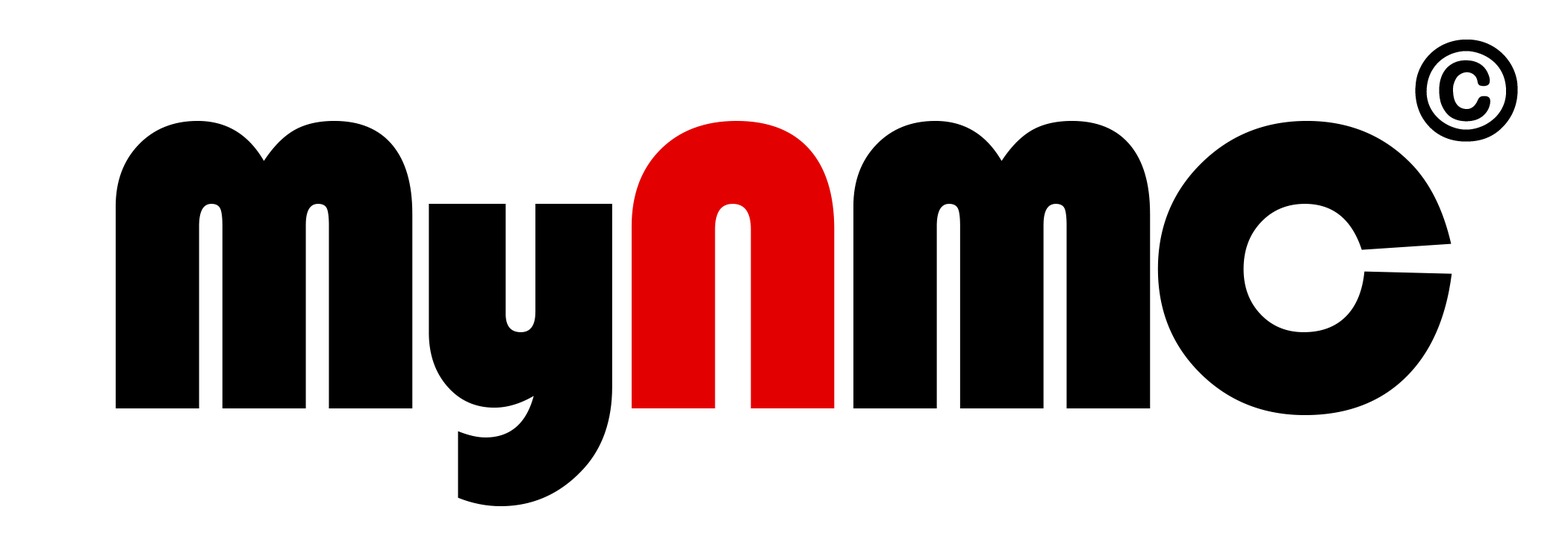
<style>
.page{position:relative;width:1568px;height:542px;background:#ffffff}
.page>*{position:absolute;margin:0}
.t1{font:420px "Bauhaus93";letter-spacing:-0.06em;color:#000000}
.t2{font:420px "Bauhaus93";letter-spacing:-0.06em;color:#e30000}
</style>
<div class="page">
<p class="t1" style="left:115px;top:121px;width:1337px;height:385px">My<span class="t2">N</span>MC</p>
</div>
